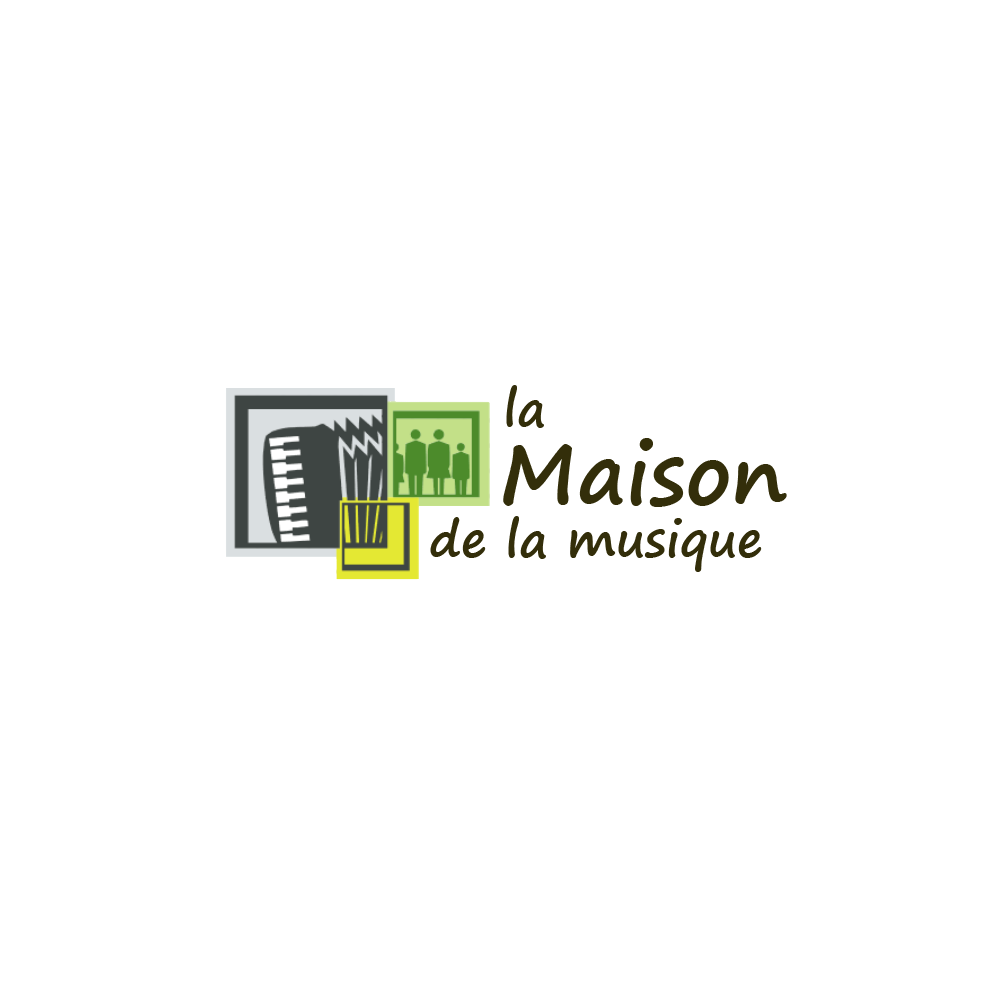
<style>
.page{position:relative;width:1000px;height:1000px;background:#ffffff}
.page>*{position:absolute;margin:0}
.t1{font:48.6px "SegoePrint-Bold";color:#332e0a}
.t2{font:83.3px "SegoePrint-Bold";color:#332e0a}
</style>
<div class="page">
<p class="t1" style="left:506px;top:385px;width:38px;height:43px">la</p>
<p class="t2" style="left:503px;top:438px;width:284px;height:69px">Maison</p>
<p class="t1" style="left:430px;top:516px;width:332px;height:56px">de la musique</p>
</div>
